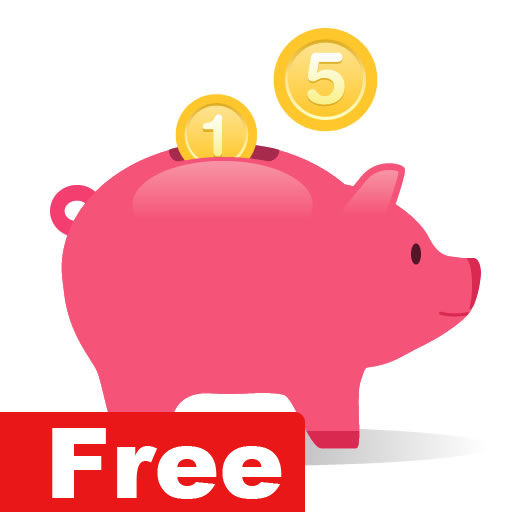
<style>
.page{position:relative;width:512px;height:512px;background:#ffffff}
.page>*{position:absolute;margin:0}
.t1{font:98px "Arial-Black";color:#ffffff}
</style>
<div class="page">
<p class="t1" style="left:52px;top:428px;width:230px;height:71px">Free</p>
</div>
